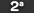
<style>
.page{position:relative;width:34px;height:13px;background:#333333}
.page>*{position:absolute;margin:0}
.t1{font:13.9px "K2D-ExtraBold";color:#ffffff}
</style>
<div class="page">
<p class="t1" style="left:10px;top:1px;width:14px;height:11px">2a</p>
</div>
